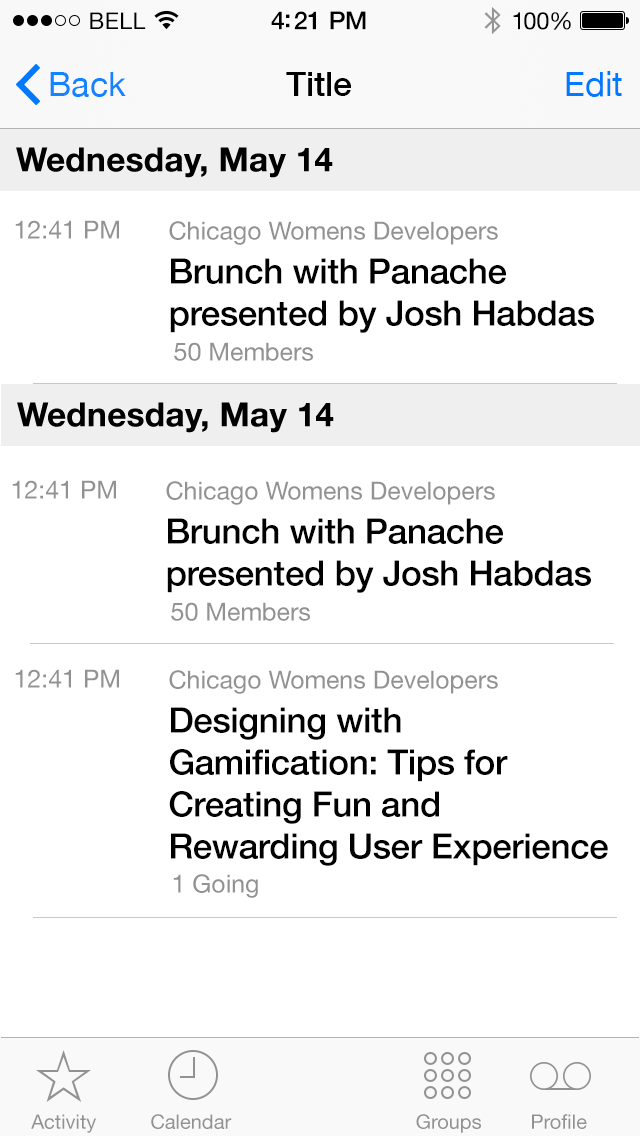
<style>
.page{position:relative;width:640px;height:1136px;background:#ffffff}
.page>*{position:absolute;margin:0}
.t1{font:23px "HelveticaNeue";letter-spacing:0.02em;color:#000000}
.t2{font:25px "HelveticaNeue-Medium";letter-spacing:-0.02em;color:#000000}
.t3{font:24px "HelveticaNeue";letter-spacing:-0.02em;color:#010101}
.t4{font:34px "HelveticaNeue";color:#1284ff}
.t5{font:34px "HelveticaNeue-Medium";color:#000000}
.t6{font:34px "HelveticaNeue";color:#0079ff}
.t7{font:25px "HelveticaNeue";color:#929292}
.t8{font:35px "HelveticaNeue-Medium";letter-spacing:-0.01em;color:#000000}
.t9{font:20px "HelveticaNeue";color:#929292}
</style>
<div class="page">
<p class="t1" style="left:90px;top:12px;width:56px;height:17px">BELL</p>
<p class="t2" style="left:271px;top:11px;width:95px;height:19px">4:21 PM</p>
<p class="t3" style="left:513px;top:12px;width:58px;height:18px">100%</p>
<p class="t4" style="left:50px;top:72px;width:76px;height:25px">Back</p>
<p class="t5" style="left:286px;top:72px;width:65px;height:24px">Title</p>
<p class="t6" style="left:566px;top:71px;width:56px;height:26px">Edit</p>
<p class="t7" style="left:15px;top:220px;width:104px;height:19px">12:41 PM</p>
<p class="t7" style="left:169px;top:221px;width:329px;height:24px">Chicago Womens Developers</p>
<p class="t8" style="left:170px;top:258px;width:424px;height:75px">Brunch with Panache<br>presented by Josh Habdas</p>
<p class="t7" style="left:174px;top:342px;width:139px;height:19px">50 Members</p>
<p class="t7" style="left:12px;top:480px;width:104px;height:19px">12:41 PM</p>
<p class="t7" style="left:166px;top:481px;width:329px;height:24px">Chicago Womens Developers</p>
<p class="t8" style="left:167px;top:518px;width:424px;height:75px">Brunch with Panache<br>presented by Josh Habdas</p>
<p class="t7" style="left:171px;top:602px;width:139px;height:19px">50 Members</p>
<p class="t7" style="left:15px;top:669px;width:104px;height:19px">12:41 PM</p>
<p class="t7" style="left:169px;top:670px;width:329px;height:24px">Chicago Womens Developers</p>
<p class="t8" style="left:169px;top:707px;width:439px;height:159px">Designing with <br>Gamification: Tips for<br>Creating Fun and <br>Rewarding User Experience</p>
<p class="t7" style="left:173px;top:874px;width:85px;height:24px">1 Going</p>
<p class="t9" style="left:31px;top:1114px;width:65px;height:19px">Activity</p>
<p class="t9" style="left:151px;top:1114px;width:81px;height:15px">Calendar</p>
<p class="t9" style="left:416px;top:1114px;width:65px;height:19px">Groups</p>
<p class="t9" style="left:532px;top:1114px;width:55px;height:15px">Profile</p>
</div>
